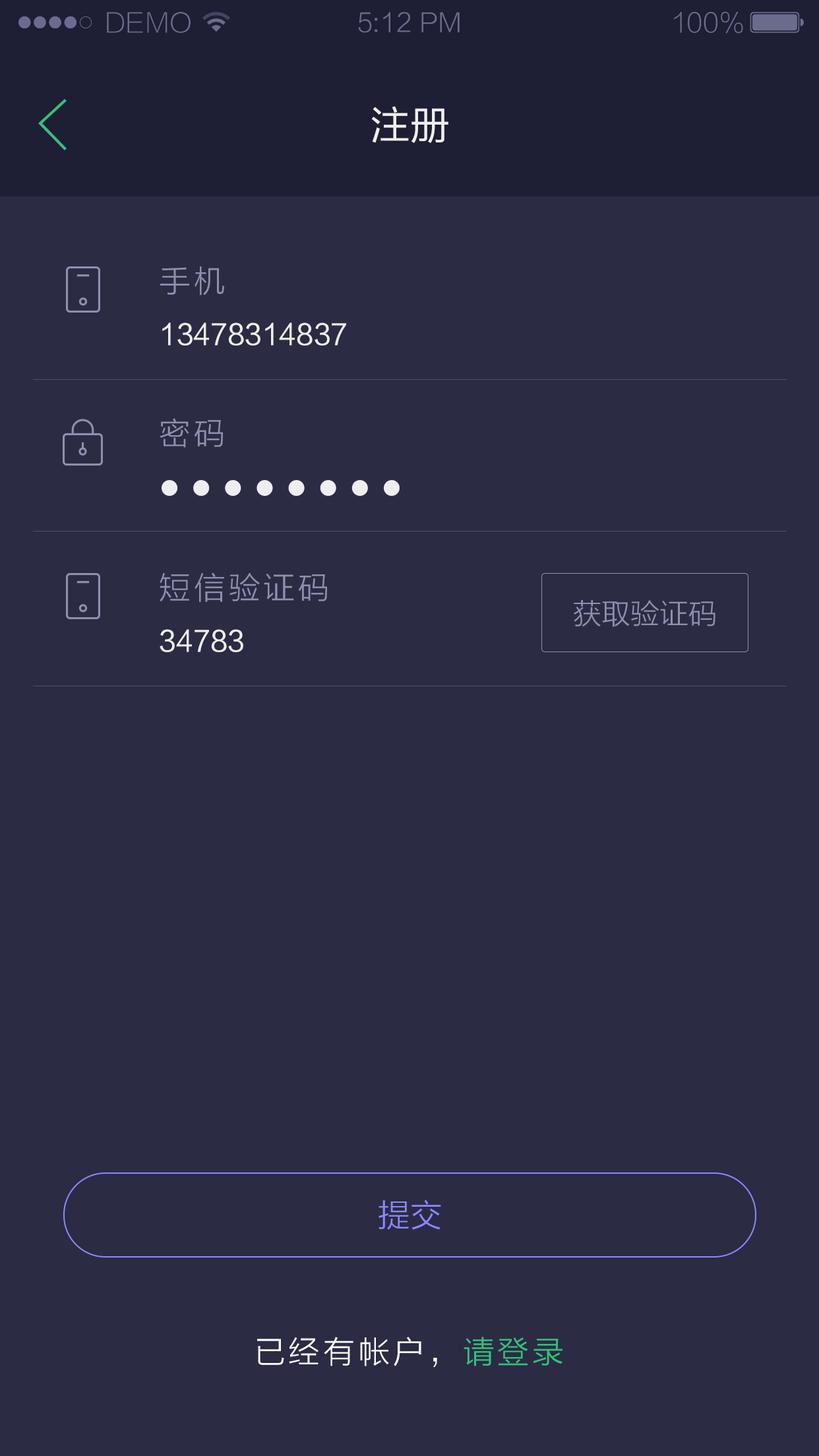
<style>
.page{position:relative;width:819px;height:1456px;background:#2b2b44}
.page>*{position:absolute;margin:0}
.t1{font:26.2px "FZLTXHK--GBK1-0";color:#6b6b8d;text-transform:uppercase}
.t2{font:26.2px "FZLTXHK";color:#6b6b8d}
.t3{font:26.2px "FZLTXHK--GBK1-0";color:#6b6b8d}
.t4{font:39.3px "FZLTHJW--GB1-0";color:#eeeeee;text-transform:uppercase}
.t5{font:31.7px "FZLTXHK";letter-spacing:0.1em;color:#908fae}
.t6{font:28.2px "FZLTHJW--GB1-0";color:#eeeeee}
.t7{font:29px "FZLTXHK";color:#908fae}
.t8{font:32.3px "FZLTXHK";color:#8c88ff}
.t9{font:31.7px "FZLTXHK";letter-spacing:0.1em;color:#ffffff}
.t10{font:31.7px "FZLTXHK";letter-spacing:0.1em;color:#31c27c}
</style>
<div class="page">
<p class="t1" style="left:107px;top:12px;width:84px;height:21px">demo</p>
<p class="t2" style="left:358px;top:12px;width:102px;height:21px">5:12 PM</p>
<p class="t3" style="left:674px;top:11px;width:69px;height:23px">100%</p>
<p class="t4" style="left:371px;top:106px;width:77px;height:37px">注册</p>
<p class="t5" style="left:160px;top:266px;width:64px;height:29px">手机</p>
<p class="t6" style="left:162px;top:322px;width:184px;height:24px">13478314837</p>
<p class="t5" style="left:160px;top:418px;width:63px;height:30px">密码</p>
<p class="t5" style="left:160px;top:572px;width:167px;height:30px">短信验证码</p>
<p class="t7" style="left:574px;top:600px;width:141px;height:27px">获取验证码</p>
<p class="t6" style="left:160px;top:629px;width:83px;height:23px">34783</p>
<p class="t8" style="left:379px;top:1199px;width:62px;height:31px">提交</p>
<p class="t9" style="left:257px;top:1337px;width:305px;height:31px">已经有帐户，<span class="t10">请登录</span></p>
</div>
